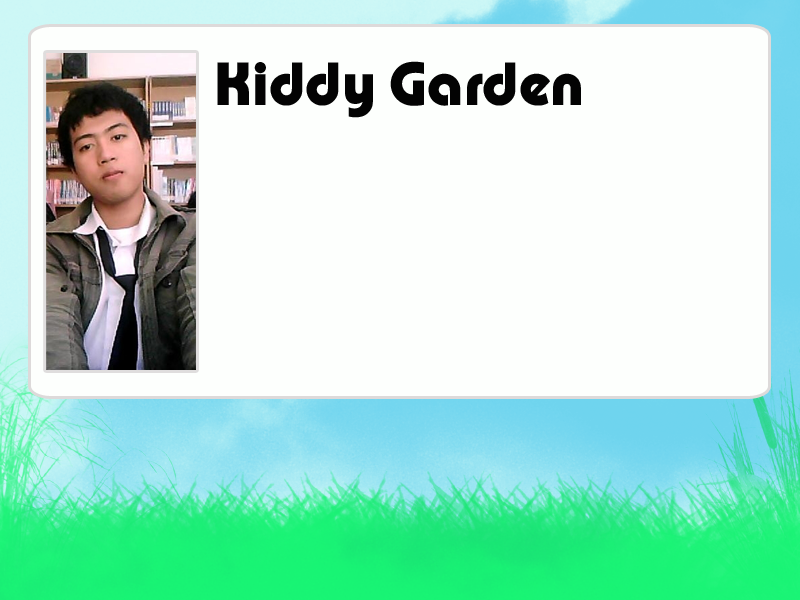
<style>
.page{position:relative;width:800px;height:600px;background:#fdfffd}
.page>*{position:absolute;margin:0}
.t1{font:63.6px "PumpDemiBoldLetPlain";color:#030303}
</style>
<div class="page">
<p class="t1" style="left:217px;top:61px;width:364px;height:57px">Kiddy Garden</p>
</div>
